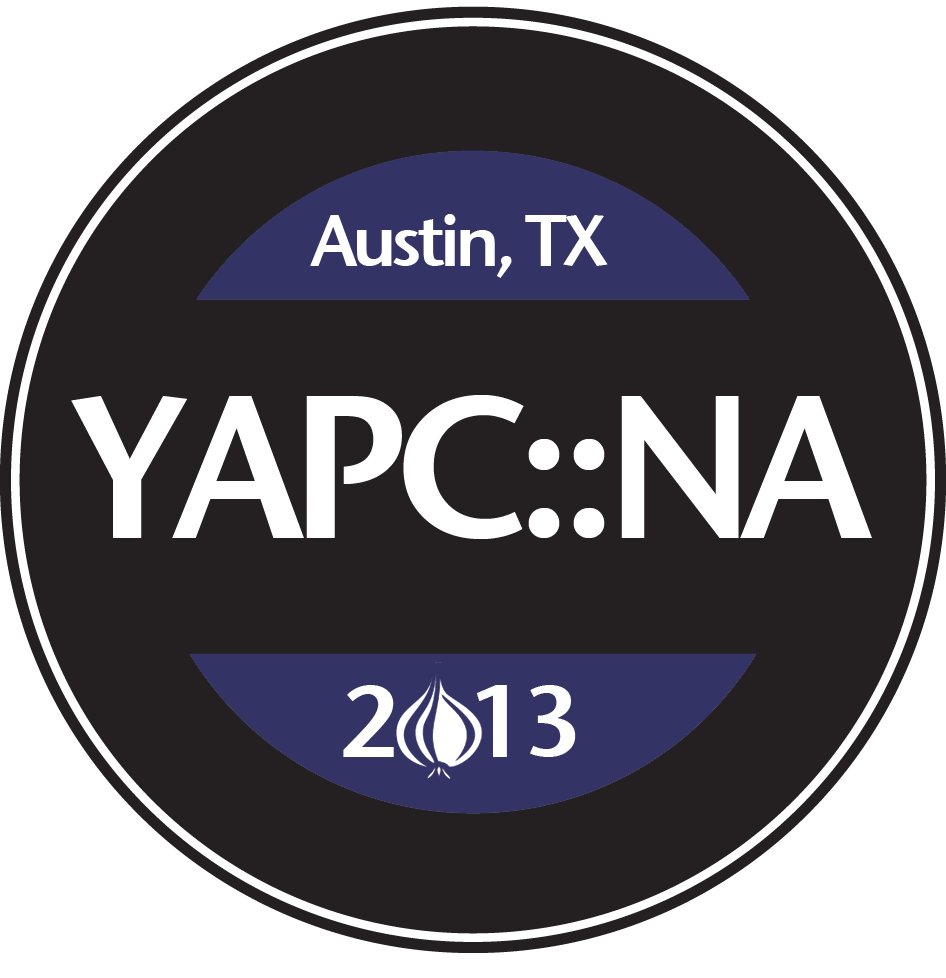
<style>
.page{position:relative;width:946px;height:978px;background:#241f20}
.page>*{position:absolute;margin:0}
.t1{font:72px "StoneSansSemITCTTSemi";letter-spacing:-0.075em;color:#ffffff}
.t2{font:200px "StoneSansSemITCTTSemi";letter-spacing:-0.075em;color:#ffffff}
.t3{font:100px "StoneSansSemITCTTSemi";letter-spacing:-0.075em;color:#ffffff}
</style>
<div class="page">
<p class="t1" style="left:310px;top:214px;width:298px;height:64px">Austin, TX</p>
<p class="t2" style="left:71px;top:395px;width:801px;height:144px">YAPC::NA</p>
<p class="t3" style="left:343px;top:685px;width:233px;height:72px">2    13</p>
</div>
